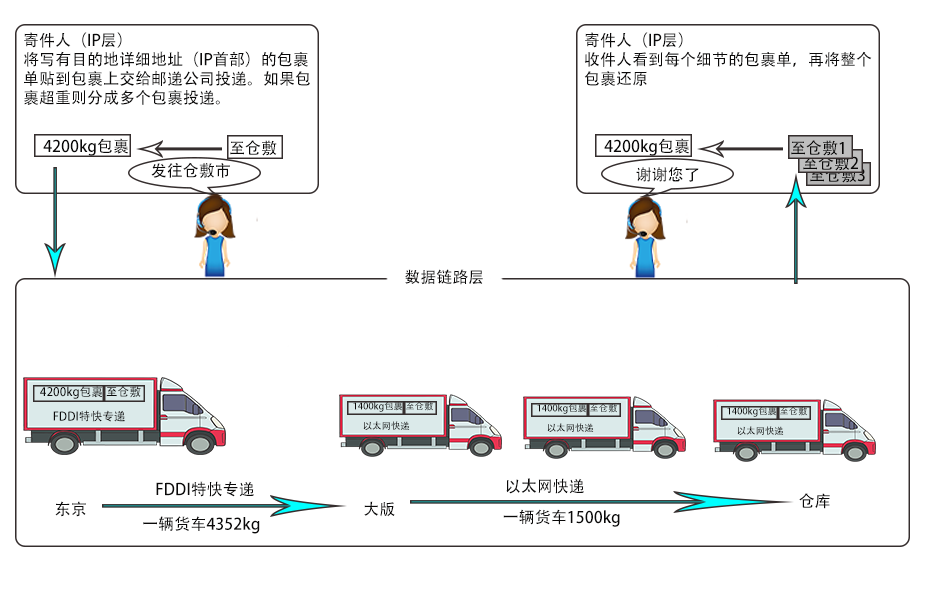
<style>
.page{position:relative;width:947px;height:605px;background:#ffffff}
.page>*{position:absolute;margin:0}
.t1{font:16px "AdobeHeitiStd-Regular";color:#0a0909}
.t2{font:11.7px "AdobeHeitiStd-Regular";color:#0a0909}
.t3{font:9.4px "AdobeHeitiStd-Regular";color:#0a0909}
.t4{font:9.4px "AdobeHeitiStd-Regular"}
</style>
<div class="page">
<p class="t1" style="left:24px;top:32px;width:286px;height:73px">寄件人（IP层）<br>将写有目的地详细地址（IP首部）的包裹<br>单贴到包裹上交给邮递公司投递。如果包<br>裹超重则分成多个包裹投递。</p>
<p class="t1" style="left:584px;top:32px;width:288px;height:54px">寄件人（IP层）<br>收件人看到每个细节的包裹单，再将整个<br>包裹还原</p>
<p class="t1" style="left:43px;top:138px;width:85px;height:18px">4200kg包裹</p>
<p class="t1" style="left:230px;top:140px;width:47px;height:16px">至仓敷</p>
<p class="t1" style="left:604px;top:138px;width:85px;height:18px">4200kg包裹</p>
<p class="t1" style="left:791px;top:140px;width:53px;height:16px">至仓敷1</p>
<p class="t1" style="left:803px;top:155px;width:55px;height:16px">至仓敷2</p>
<p class="t1" style="left:151px;top:162px;width:79px;height:16px">发往仓敷市</p>
<p class="t1" style="left:636px;top:167px;width:63px;height:15px">谢谢您了</p>
<p class="t1" style="left:810px;top:167px;width:55px;height:16px">至仓敷3</p>
<p class="t1" style="left:405px;top:269px;width:78px;height:16px">数据链路层</p>
<p class="t2" style="left:40px;top:386px;width:63px;height:13px">4200kg包裹</p>
<p class="t2" style="left:106px;top:386px;width:35px;height:12px">至仓敷</p>
<p class="t3" style="left:353px;top:401px;width:50px;height:11px">1400kg包裹</p>
<p class="t4" style="left:406px;top:401px;width:27px;height:10px">至仓敷</p>
<p class="t2" style="left:53px;top:410px;width:72px;height:12px">FDDI特快专递</p>
<p class="t3" style="left:537px;top:403px;width:50px;height:11px">1400kg包裹</p>
<p class="t4" style="left:590px;top:403px;width:27px;height:10px">至仓敷</p>
<p class="t3" style="left:727px;top:406px;width:50px;height:11px">1400kg包裹</p>
<p class="t4" style="left:780px;top:406px;width:27px;height:10px">至仓敷</p>
<p class="t3" style="left:363px;top:421px;width:47px;height:9px">以太网快递</p>
<p class="t3" style="left:547px;top:423px;width:47px;height:9px">以太网快递</p>
<p class="t3" style="left:737px;top:426px;width:47px;height:9px">以太网快递</p>
<p class="t1" style="left:156px;top:481px;width:98px;height:16px">FDDI特快专递</p>
<p class="t1" style="left:506px;top:478px;width:78px;height:16px">以太网快递</p>
<p class="t1" style="left:799px;top:493px;width:31px;height:16px">仓库</p>
<p class="t1" style="left:55px;top:501px;width:31px;height:16px">东京</p>
<p class="t1" style="left:364px;top:501px;width:31px;height:16px">大版</p>
<p class="t1" style="left:503px;top:509px;width:117px;height:18px">一辆货车1500kg</p>
<p class="t1" style="left:143px;top:516px;width:117px;height:18px">一辆货车4352kg</p>
</div>
